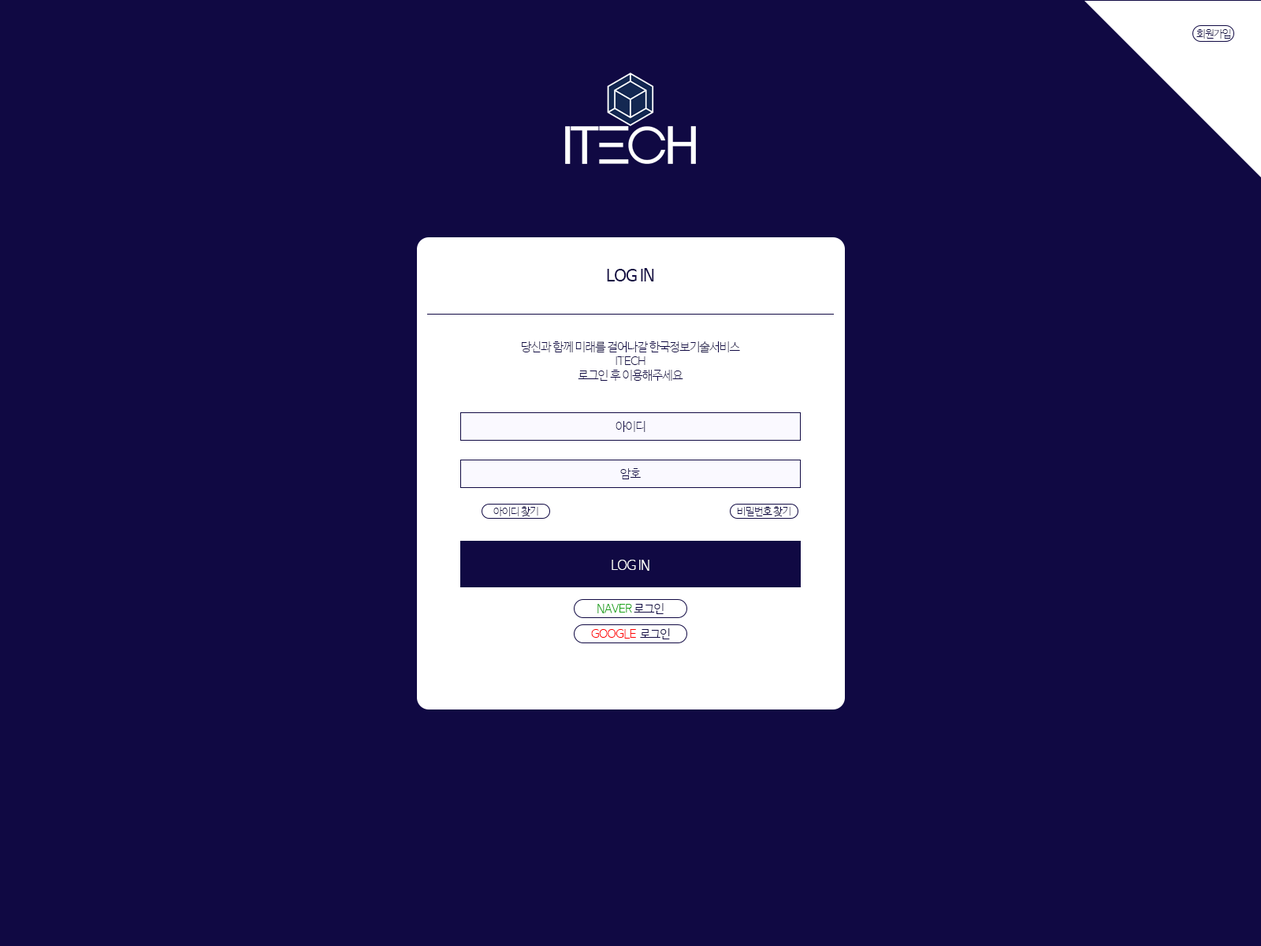
<style>
.page{position:relative;width:1261px;height:946px;background:#100943}
.page>*{position:absolute;margin:0}
.t1{font:10.2px "NanumBarunGothicUltraLight";letter-spacing:-0.045em;color:#100943}
.t2{font:16.5px "NanumBarunGothic";letter-spacing:-0.045em;color:#100943}
.t3{font:11.8px "NanumBarunGothicUltraLight";letter-spacing:-0.045em;color:#100943}
.t4{font:13.4px "NanumBarunGothicLight";letter-spacing:-0.045em;color:#ffffff}
.t5{font:11.8px "NanumBarunGothicLight";letter-spacing:-0.045em;color:#1ca419}
.t6{font:11.8px "NanumBarunGothicLight";letter-spacing:-0.045em;color:#100943}
.t7{font:11.8px "NanumBarunGothicLight";letter-spacing:-0.045em;color:#ff0000}
</style>
<div class="page">
<p class="t1" style="left:1196px;top:29px;width:35px;height:10px">회원가입</p>
<p class="t2" style="left:607px;top:268px;width:47px;height:13px">LOG IN</p>
<p class="t3" style="left:522px;top:341px;width:218px;height:40px;text-align:center">당신과 함께 미래를 걸어나갈 한국정보기술서비스<br>ITECH<br>로그인 후 이용해주세요</p>
<p class="t3" style="left:615px;top:421px;width:30px;height:11px">아이디</p>
<p class="t3" style="left:620px;top:468px;width:21px;height:11px">암호</p>
<p class="t1" style="left:493px;top:506px;width:45px;height:11px">아이디 찾기</p>
<p class="t1" style="left:737px;top:506px;width:53px;height:11px">비밀번호 찾기</p>
<p class="t4" style="left:612px;top:560px;width:37px;height:11px">LOG IN</p>
<p class="t5" style="left:597px;top:603px;width:67px;height:11px">NAVER<span class="t6"> 로그인</span></p>
<p class="t7" style="left:591px;top:628px;width:79px;height:11px">GOOGLE  <span class="t6">로그인</span></p>
</div>
